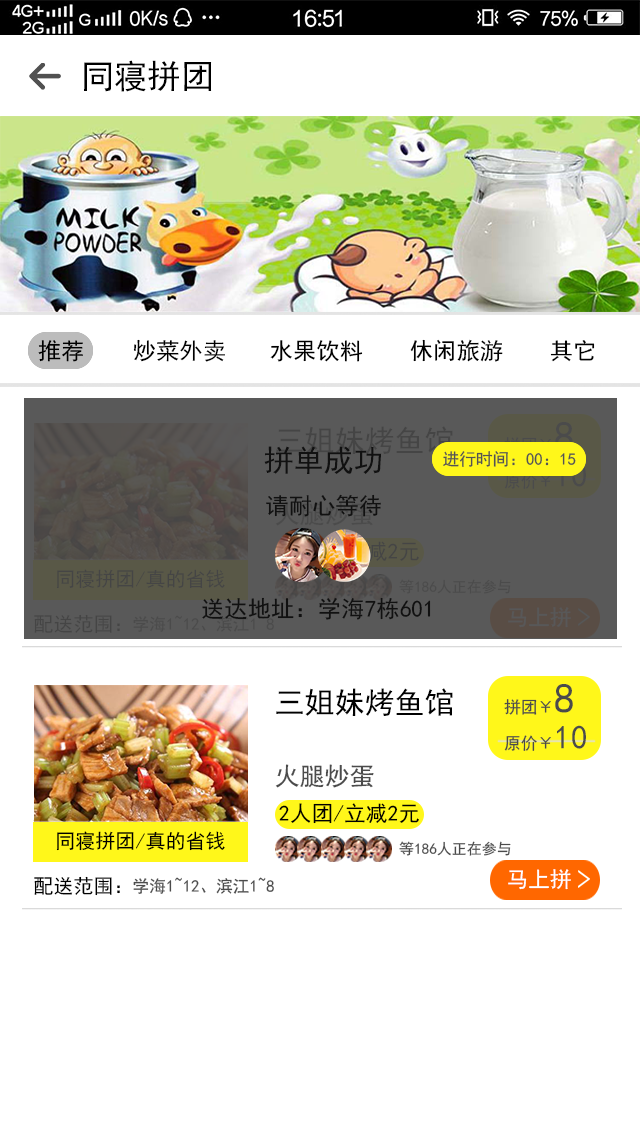
<style>
.page{position:relative;width:640px;height:1136px;background:#ffffff}
.page>*{position:absolute;margin:0}
.t1{font:33.3px "SimHei";letter-spacing:0.002em;color:#000000}
.t2{font:23.3px "SimHei";letter-spacing:0.002em;color:#000000}
.t3{font:30px "SimHei";letter-spacing:0.002em;color:#454545}
.t4{font:30px "SimHei";letter-spacing:0.002em;color:#111111}
.t5{font:16.7px "SimHei";letter-spacing:0.002em;color:#535353}
.t6{font:23.3px "SimHei";letter-spacing:0.002em;color:#111111}
.t7{font:20px "SimHei";letter-spacing:0.002em;color:#454545}
.t8{font:15px "SimHei";letter-spacing:0.002em;color:#4b4b4b}
.t9{font:21.7px "SimHei";letter-spacing:0.002em;color:#585858}
.t10{font:30px "SimHei";letter-spacing:0.002em;color:#010101}
.t11{font:16.7px/43.1px "SimHei";letter-spacing:0.002em;color:#4b4b4b}
.t12{font:41.7px/43.1px "SimHei";letter-spacing:0.002em;color:#4b4b4b}
.t13{font:33.3px/43.1px "SimHei";letter-spacing:0.002em;color:#4b4b4b}
.t14{font:25px "SimHei";letter-spacing:0.002em;color:#4b4b4b}
.t15{font:21.7px "SimHei";letter-spacing:0.002em;color:#000000}
.t16{font:20px "SimHei";letter-spacing:0.002em;color:#000000}
.t17{font:21.7px "SimHei";letter-spacing:0.002em;color:#ffffff}
.t18{font:20px "SimHei";letter-spacing:0.002em;color:#010101}
.t19{font:16.7px "SimHei";letter-spacing:0.002em;color:#4b4b4b}
</style>
<div class="page">
<p class="t1" style="left:84px;top:60px;width:128px;height:32px">同寝拼团</p>
<p class="t2" style="left:38px;top:340px;width:45px;height:22px">推荐</p>
<p class="t2" style="left:133px;top:339px;width:92px;height:23px">炒菜外卖</p>
<p class="t2" style="left:270px;top:340px;width:93px;height:22px">水果饮料</p>
<p class="t2" style="left:410px;top:339px;width:93px;height:23px">休闲旅游</p>
<p class="t2" style="left:550px;top:340px;width:45px;height:22px">其它</p>
<p class="t3" style="left:276px;top:426px;width:177px;height:28px">三姐妹烤鱼馆</p>
<p class="t4" style="left:264px;top:446px;width:118px;height:28px">拼单成功</p>
<p class="t5" style="left:443px;top:451px;width:133px;height:16px">进行时间：00：15</p>
<p class="t6" style="left:266px;top:494px;width:115px;height:23px">请耐心等待</p>
<p class="t7" style="left:56px;top:569px;width:169px;height:20px">同寝拼团/真的省钱</p>
<p class="t8" style="left:399px;top:579px;width:112px;height:15px">等186人正在参与</p>
<p class="t6" style="left:202px;top:597px;width:229px;height:23px">送达地址：学海7栋601</p>
<p class="t7" style="left:34px;top:614px;width:86px;height:20px">配送范围：</p>
<p class="t9" style="left:508px;top:607px;width:63px;height:21px">马上拼</p>
<p class="t10" style="left:276px;top:688px;width:177px;height:28px">三姐妹烤鱼馆</p>
<p class="t11" style="left:504px;top:684px;width:82px;height:67px">拼团￥<span class="t12">8<br></span>原价￥<span class="t13">10</span></p>
<p class="t14" style="left:275px;top:764px;width:99px;height:24px">火腿炒蛋</p>
<p class="t15" style="left:279px;top:803px;width:140px;height:21px">2人团/立减2元</p>
<p class="t16" style="left:56px;top:831px;width:169px;height:20px">同寝拼团/真的省钱</p>
<p class="t8" style="left:399px;top:841px;width:112px;height:15px">等186人正在参与</p>
<p class="t17" style="left:508px;top:869px;width:63px;height:21px">马上拼</p>
<p class="t18" style="left:34px;top:876px;width:86px;height:20px">配送范围：</p>
<p class="t19" style="left:133px;top:877px;width:141px;height:17px">学海1~12、滨江1~8</p>
</div>
